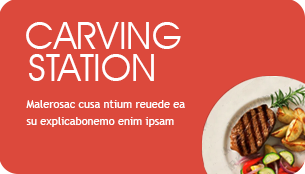
<style>
.page{position:relative;width:305px;height:174px;background:#dc493c}
.page>*{position:absolute;margin:0}
.t1{font:38px "AvantGardeITCbyBT-Book";color:#ffffff}
.t2{font:11px "TrebuchetMS";color:#ffffff}
</style>
<div class="page">
<p class="t1" style="left:26px;top:22px;width:155px;height:59px">CARVING<br>STATION</p>
<p class="t2" style="left:26px;top:100px;width:159px;height:27px">Malerosac cusa ntium reuede ea<br>su explicabonemo enim ipsam</p>
</div>
